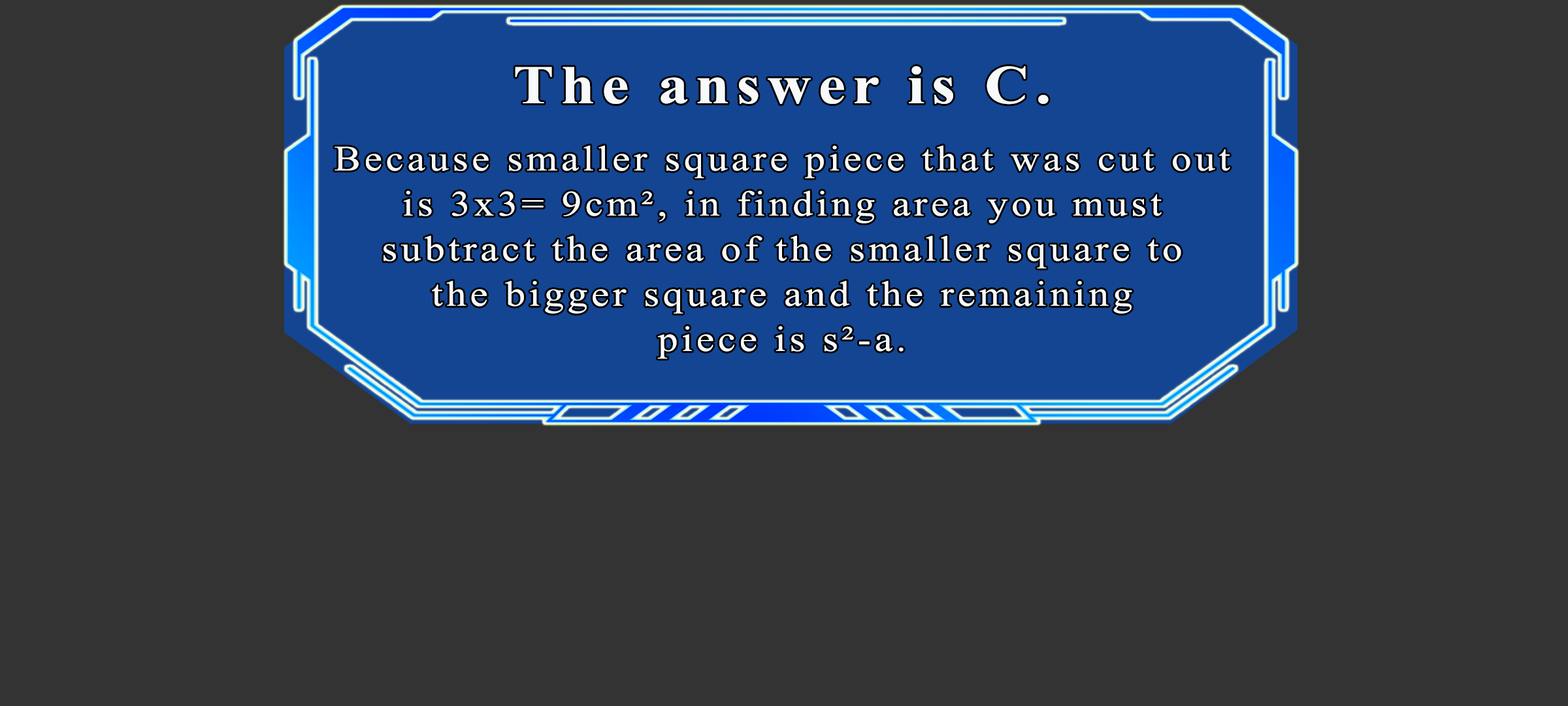
<style>
.page{position:relative;width:1568px;height:706px;background:#333333}
.page>*{position:absolute;margin:0}
.t1{font:54.4px "TimesNewRomanPS-BoldMT";letter-spacing:0.115em;color:#f7f9fb;scale:1.12 1}
.t2{font:35.6px/45.1px "TimesNewRomanPSMT";letter-spacing:0.095em;color:#f7f9fb;scale:1.12 1}
</style>
<div class="page">
<p class="t1" style="left:515px;top:66px;width:534px;height:39px">The answer is C.</p>
<p class="t2" style="left:335px;top:145px;width:895px;height:214px;text-align:center">Because smaller square piece that was cut out<br>is 3x3= 9cm², in finding area you must<br>subtract the area of the smaller square to<br>the bigger square and the remaining<br>piece is s²-a.</p>
</div>
